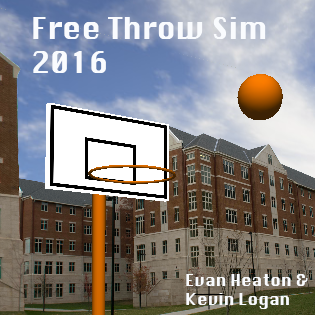
<style>
.page{position:relative;width:315px;height:315px}
.page>*{position:absolute;margin:0}
.t1{font:29px "Krungthep";color:#f9fbfe}
.t2{font:16px "Krungthep";color:#f9fbfe}
</style>
<div class="page">
<p class="t1" style="left:33px;top:17px;width:233px;height:56px">Free Throw Sim<br>2016</p>
<p class="t2" style="left:186px;top:274px;width:122px;height:35px">Evan Heaton &amp;<br>Kevin Logan</p>
</div>
